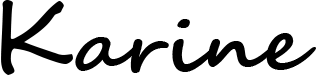
<style>
.page{position:relative;width:316px;height:75px;background:#ffffff}
.page>*{position:absolute;margin:0}
.t1{font:68px "SegoeScript-Bold";letter-spacing:-0.01em;color:#000000;scale:1.18 1}
.t2{font:99px "SegoeScript";letter-spacing:-0.01em;color:#000000;scale:1.11 1}
</style>
<div class="page">
<p class="t1" style="left:1px;top:0px;width:315px;height:75px"><span class="t2">K</span>arine</p>
</div>
